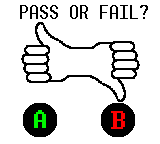
<style>
.page{position:relative;width:160px;height:144px;background:#ffffff}
.page>*{position:absolute;margin:0}
.t1{font:22.5px "Terminal";color:#000000;text-transform:uppercase}
</style>
<div class="page">
<p class="t1" style="left:20px;top:5px;width:128px;height:14px">pass or fail?</p>
</div>
